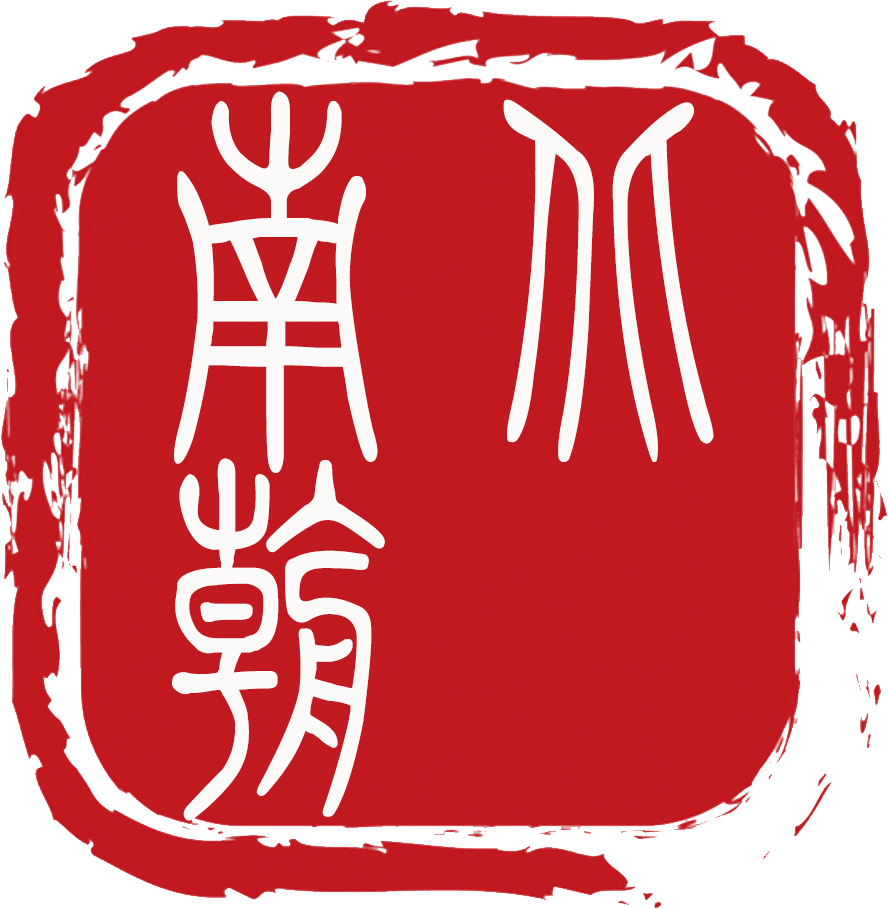
<style>
.page{position:relative;width:888px;height:909px;background:#c11920}
.page>*{position:absolute;margin:0}
.t1{font:400px/356px "FZXZTFW--GB1-0";letter-spacing:-0.16em;color:#fcf9f9}
</style>
<div class="page">
<p class="t1" style="left:172px;top:91px;width:542px;height:730px">南北<br>朝</p>
</div>
